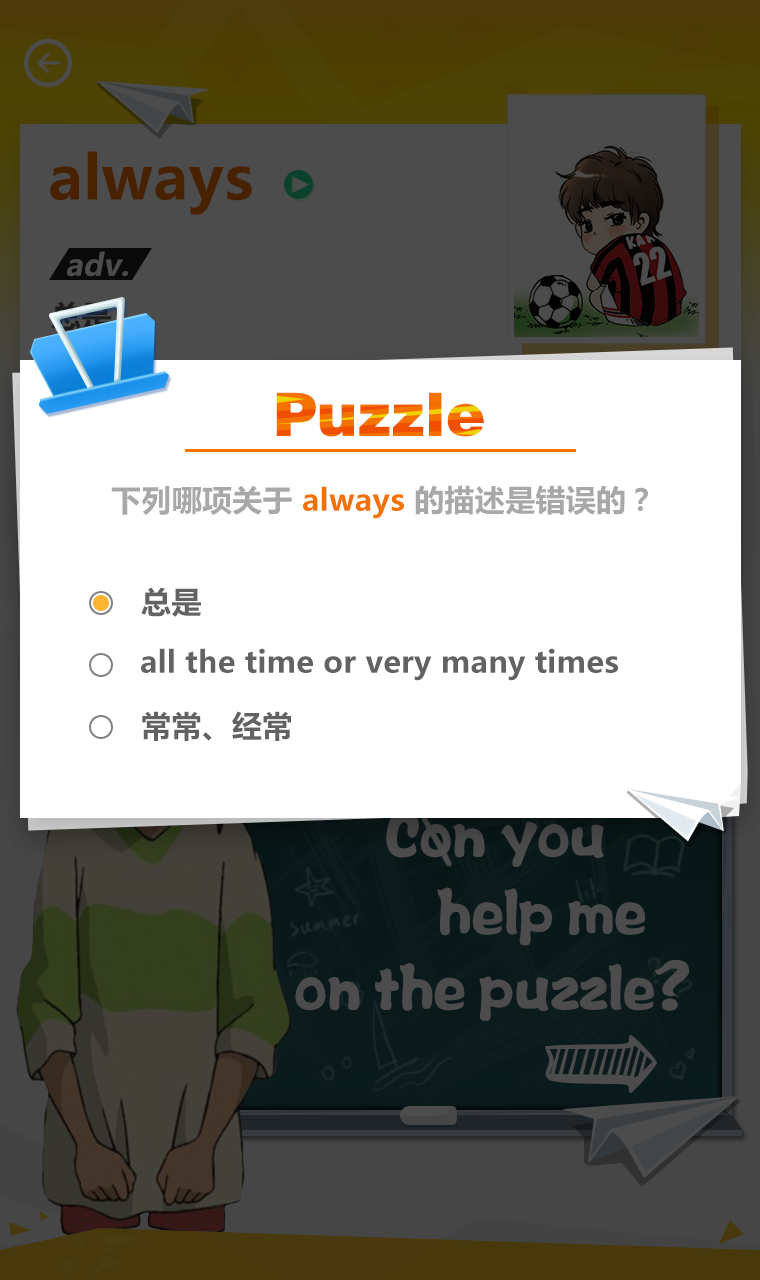
<style>
.page{position:relative;width:760px;height:1280px;background:#ffffff}
.page>*{position:absolute;margin:0}
.t1{font:60px "FZCCHJW--GB1-0";letter-spacing:0.01em}
.t2{font:30px "MicrosoftYaHei-Bold";letter-spacing:0.01em;color:#a8a8a8}
.t3{font:30px "MicrosoftYaHei-Bold";letter-spacing:0.01em;color:#f37200}
.t4{font:30px "MicrosoftYaHei-Bold";letter-spacing:0.01em;color:#626262}
</style>
<div class="page">
<p class="t1" style="left:276px;top:392px;width:208px;height:45px">Puzzle</p>
<p class="t2" style="left:111px;top:485px;width:537px;height:34px">下列哪项关于 <span class="t3">always </span>的描述是错误的？</p>
<p class="t4" style="left:141px;top:587px;width:60px;height:30px">总是</p>
<p class="t4" style="left:141px;top:648px;width:477px;height:33px">all the time or very many times</p>
<p class="t4" style="left:142px;top:711px;width:149px;height:30px">常常、经常</p>
</div>
